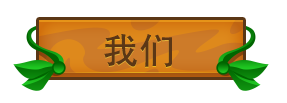
<style>
.page{position:relative;width:287px;height:103px;background:#ffffff}
.page>*{position:absolute;margin:0}
.t1{font:36px "AdobeHeitiStd-Regular";letter-spacing:0.025em;color:#5b3716}
</style>
<div class="page">
<p class="t1" style="left:104px;top:34px;width:68px;height:33px">我们</p>
</div>
